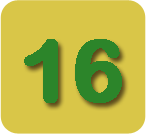
<style>
.page{position:relative;width:146px;height:134px;background:#d9c648}
.page>*{position:absolute;margin:0}
.t1{font:86.1px "ArialRoundedMTBold";letter-spacing:-0.01em;color:#2c852a;font-weight:bold}
</style>
<div class="page">
<p class="t1" style="left:24px;top:39px;width:98px;height:64px">16</p>
</div>
